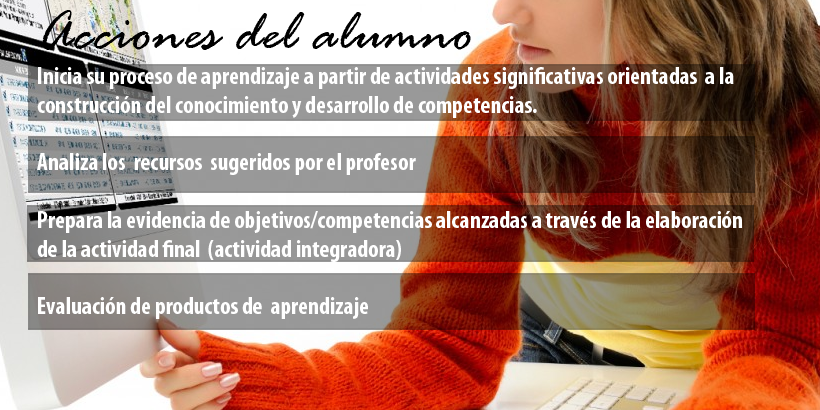
<style>
.page{position:relative;width:820px;height:410px}
.page>*{position:absolute;margin:0}
.t1{font:60px "RageItalic";color:#000000}
.t2{font:24px "MyriadPro-BoldCond";color:#ffffff}
</style>
<div class="page">
<p class="t1" style="left:42px;top:10px;width:429px;height:40px">Acciones del alumno</p>
<p class="t2" style="left:37px;top:67px;width:705px;height:252px">Inicia su proceso de aprendizaje a partir de actividades significativas orientadas  a la <br>construcción del conocimiento y desarrollo de competencias.<br><br>Analiza los  recursos  sugeridos por el profesor<br><br>Prepara la evidencia de objetivos/competencias alcanzadas a través de la elaboración <br>de la actividad final  (actividad integradora)<br><br>Evaluación de productos de  aprendizaje</p>
</div>
